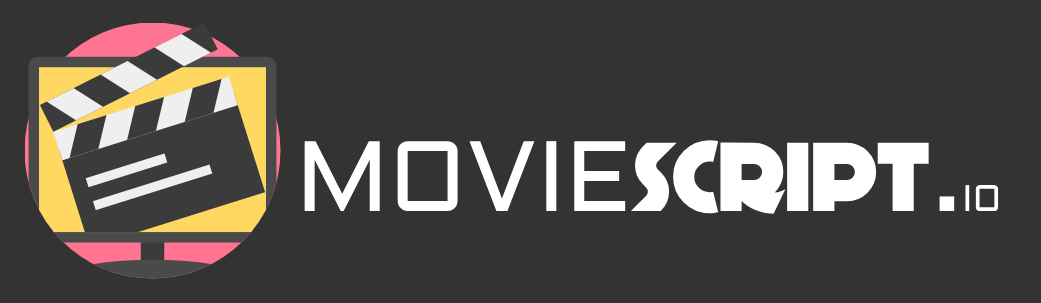
<style>
.page{position:relative;width:1041px;height:303px;background:#333333}
.page>*{position:absolute;margin:0}
.t1{font:99.8px "Anagram";color:#ffffff}
.t2{font:99.8px "Aldrich-Regular";color:#ffffff}
.t3{font:37px "Aldrich-Regular";color:#ffffff}
</style>
<div class="page">
<p class="t1" style="left:304px;top:140px;width:695px;height:74px"><span class="t2">MOVIE</span>SCRIPT<span class="t2">.</span><span class="t3">IO</span></p>
</div>
